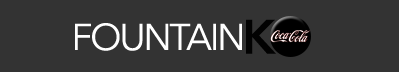
<style>
.page{position:relative;width:399px;height:72px;background:#333333}
.page>*{position:absolute;margin:0}
.t1{font:37px "AvenirNext-Regular";letter-spacing:-0.06em;color:#ffffff}
.t2{font:48px "Avenir-Heavy";letter-spacing:-0.085em;color:#020202}
</style>
<div class="page">
<p class="t1" style="left:75px;top:23px;width:167px;height:28px">FOUNTAIN</p>
<p class="t2" style="left:246px;top:19px;width:30px;height:35px">K</p>
</div>
